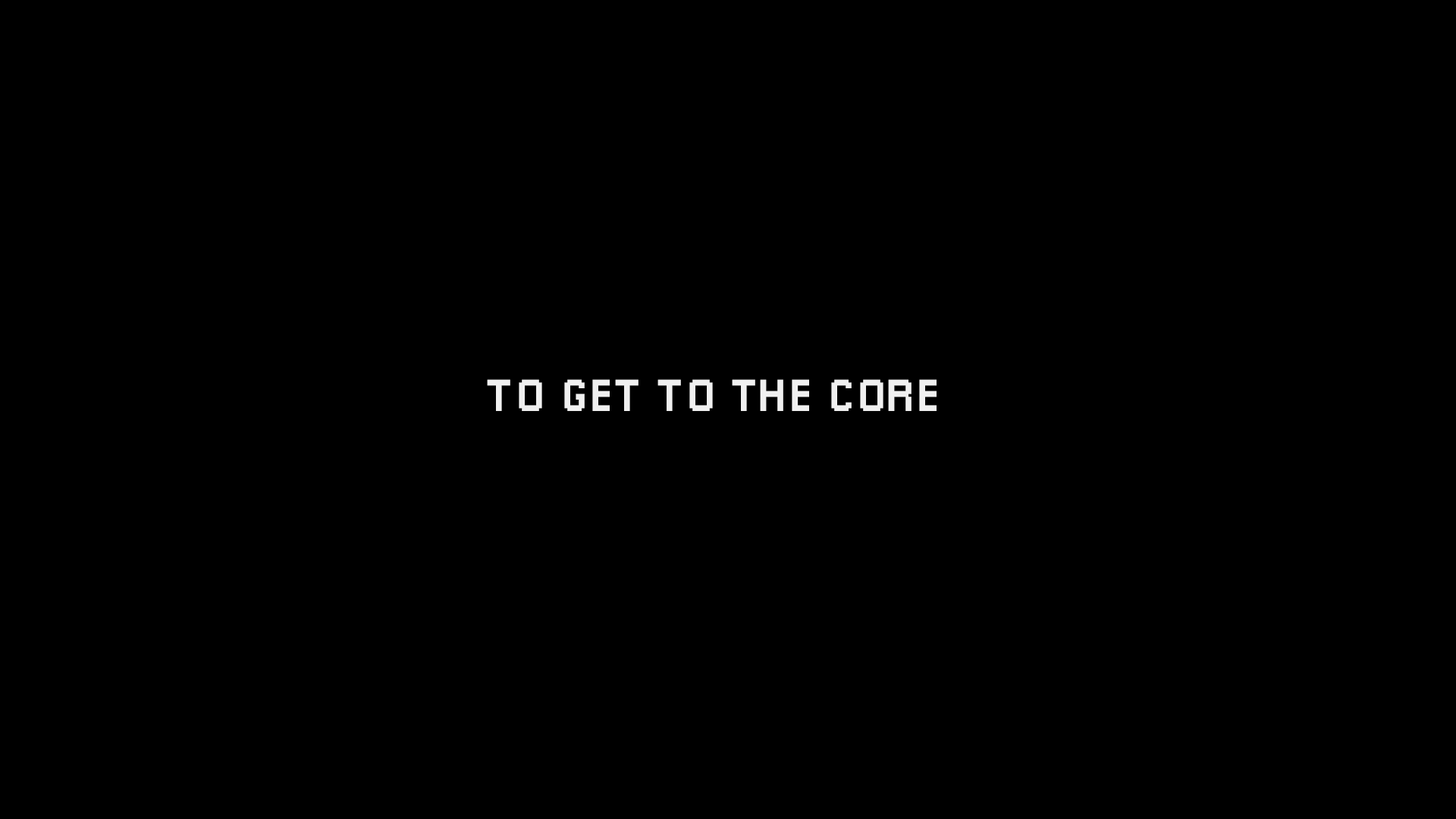
<style>
.page{position:relative;width:1456px;height:819px;background:#000000}
.page>*{position:absolute;margin:0}
.t1{font:45.5px "Pixellari";color:#f0f0f0}
</style>
<div class="page">
<p class="t1" style="left:487px;top:379px;width:450px;height:32px">TO GET TO THE CORE</p>
</div>
